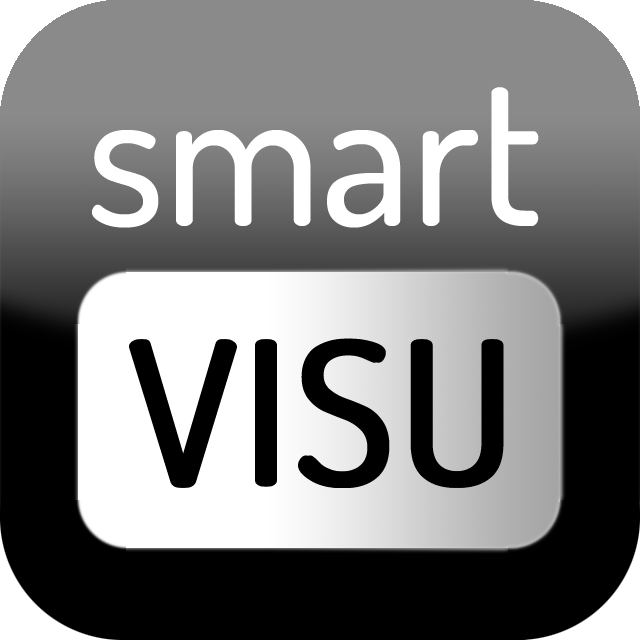
<style>
.page{position:relative;width:640px;height:640px;background:#000000}
.page>*{position:absolute;margin:0}
.t1{font:200px "Dosis-Medium";color:#ffffff}
.t2{font:200px "Dosis-Medium";color:#000000;font-weight:bold}
</style>
<div class="page">
<p class="t1" style="left:92px;top:87px;width:447px;height:141px">smart</p>
<p class="t2" style="left:129px;top:338px;width:371px;height:150px">VISU</p>
<p class="t2" style="left:133px;top:338px;width:371px;height:150px">VISU</p>
</div>
